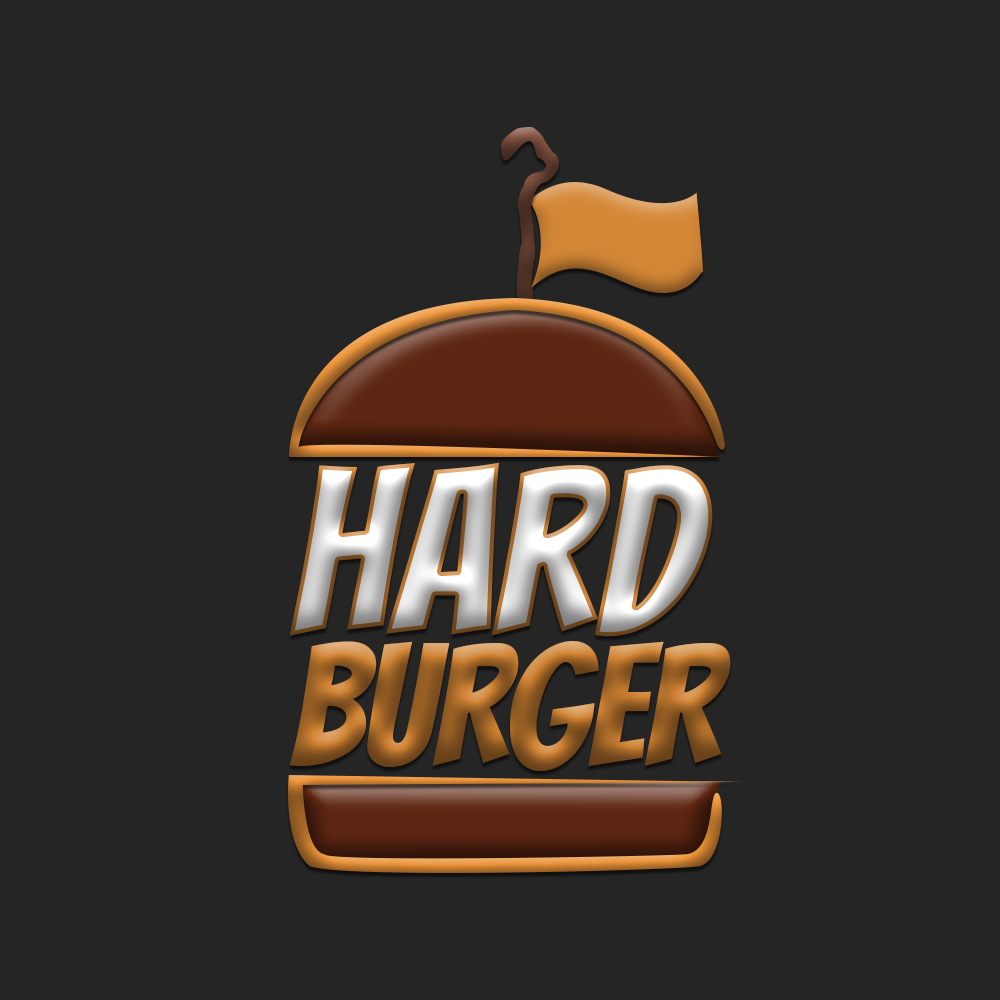
<style>
.page{position:relative;width:1000px;height:1000px;background:#252525}
.page>*{position:absolute;margin:0}
.t1{font:232.3px "Bangers-Regular"}
.t2{font:168.1px "Bangers-Regular"}
</style>
<div class="page">
<p class="t1" style="left:289px;top:462px;width:424px;height:175px">hard</p>
<p class="t2" style="left:289px;top:641px;width:442px;height:130px">BURGER</p>
</div>
